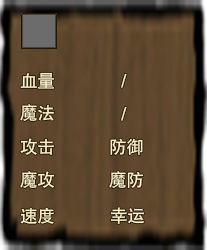
<style>
.page{position:relative;width:207px;height:250px}
.page>*{position:absolute;margin:0}
.t1{font:17.7px "FZHTJW--GB1-0";letter-spacing:-0.025em;color:#fdf2cc}
</style>
<div class="page">
<p class="t1" style="left:20px;top:72px;width:35px;height:17px">血量</p>
<p class="t1" style="left:121px;top:73px;width:6px;height:15px">/</p>
<p class="t1" style="left:20px;top:104px;width:34px;height:17px">魔法</p>
<p class="t1" style="left:121px;top:106px;width:6px;height:15px">/</p>
<p class="t1" style="left:20px;top:138px;width:34px;height:17px">攻击</p>
<p class="t1" style="left:110px;top:138px;width:33px;height:17px">防御</p>
<p class="t1" style="left:20px;top:171px;width:35px;height:17px">魔攻</p>
<p class="t1" style="left:109px;top:171px;width:35px;height:17px">魔防</p>
<p class="t1" style="left:20px;top:207px;width:34px;height:17px">速度</p>
<p class="t1" style="left:110px;top:207px;width:34px;height:17px">幸运</p>
</div>
